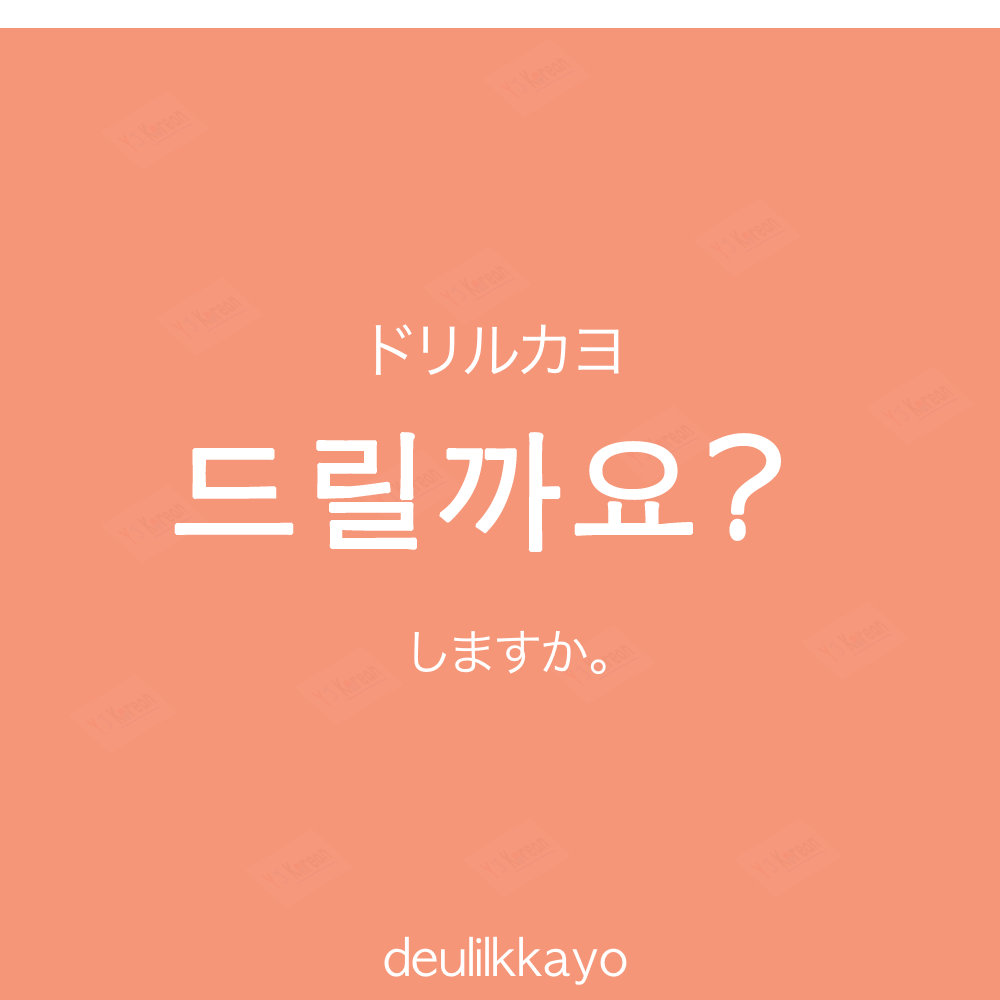
<style>
.page{position:relative;width:1000px;height:1000px;background:#f69679}
.page>*{position:absolute;margin:0}
.t1{font:60px "HiraKakuProN-W3";color:#ffffff;text-transform:uppercase}
.t2{font:130px "AppleGothic";color:#ffffff;font-weight:bold}
.t3{font:50px "HiraKakuProN-W3";color:#ffffff}
.t4{font:50px "AppleGothic";color:#ffffff}
</style>
<div class="page">
<p class="t1" style="left:375px;top:324px;width:244px;height:51px">ドリルカヨ</p>
<p class="t2" style="left:174px;top:432px;width:607px;height:120px">드릴까요?</p>
<p class="t3" style="left:414px;top:630px;width:192px;height:45px">しますか。</p>
<p class="t4" style="left:384px;top:936px;width:243px;height:49px">deulilkkayo</p>
</div>
